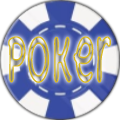
<style>
.page{position:relative;width:120px;height:120px}
.page>*{position:absolute;margin:0}
.t1{font:59.7px "DeliusUnicase-Bold";scale:0.51 1}
</style>
<div class="page">
<p class="t1" style="left:8px;top:36px;width:104px;height:47px">Poker</p>
</div>
